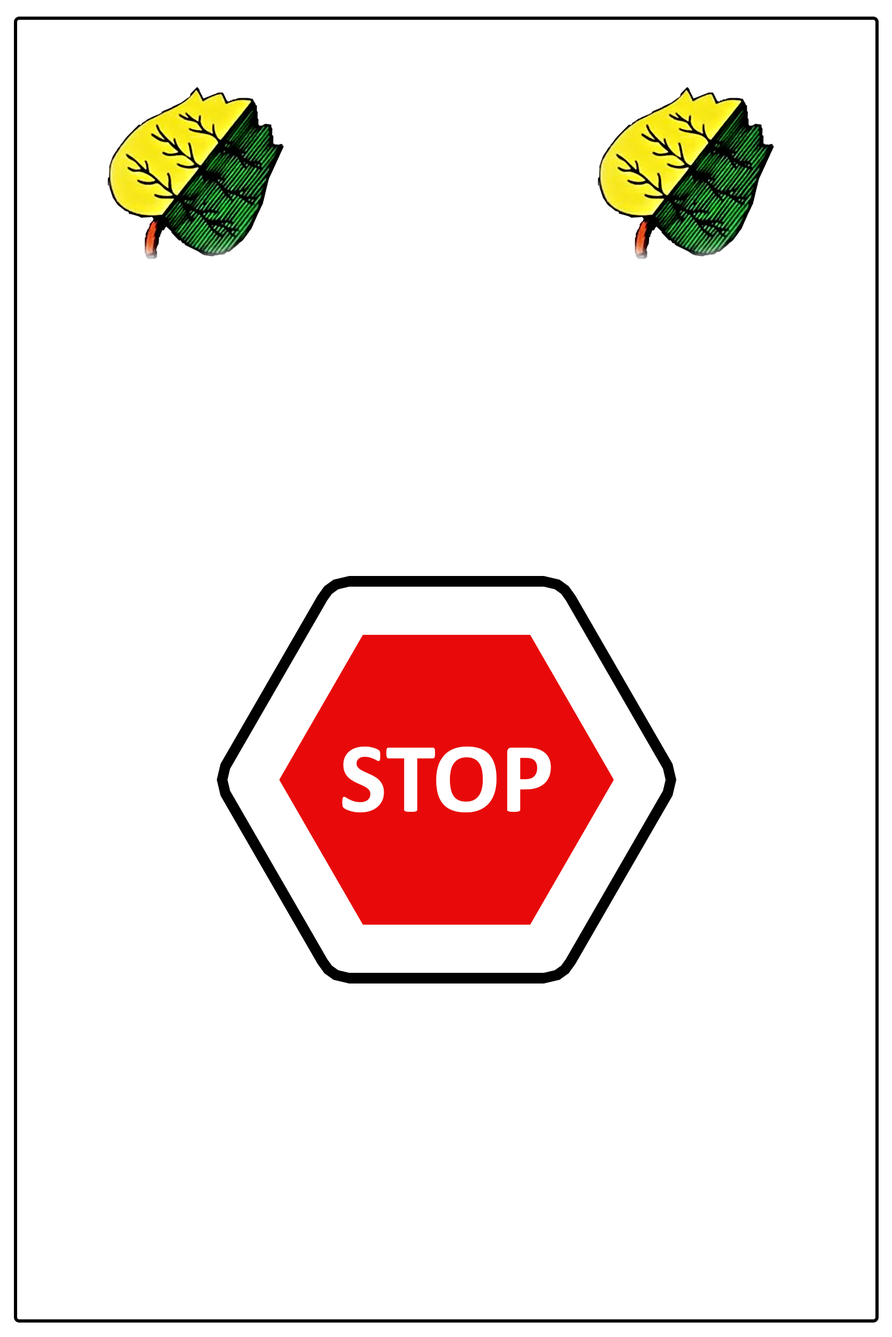
<style>
.page{position:relative;width:892px;height:1337px;background:#ffffff}
.page>*{position:absolute;margin:0}
.t1{font:100.3px "Calibri-Bold";color:#ffffff}
</style>
<div class="page">
<p class="t1" style="left:342px;top:747px;width:209px;height:66px">STOP</p>
</div>
